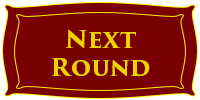
<style>
.page{position:relative;width:200px;height:100px;background:#790000}
.page>*{position:absolute;margin:0}
.t1{font:24px "TrajanPro3-Bold";color:#edd200}
</style>
<div class="page">
<p class="t1" style="left:51px;top:29px;width:99px;height:48px;text-align:center">Next<br>Round</p>
</div>
